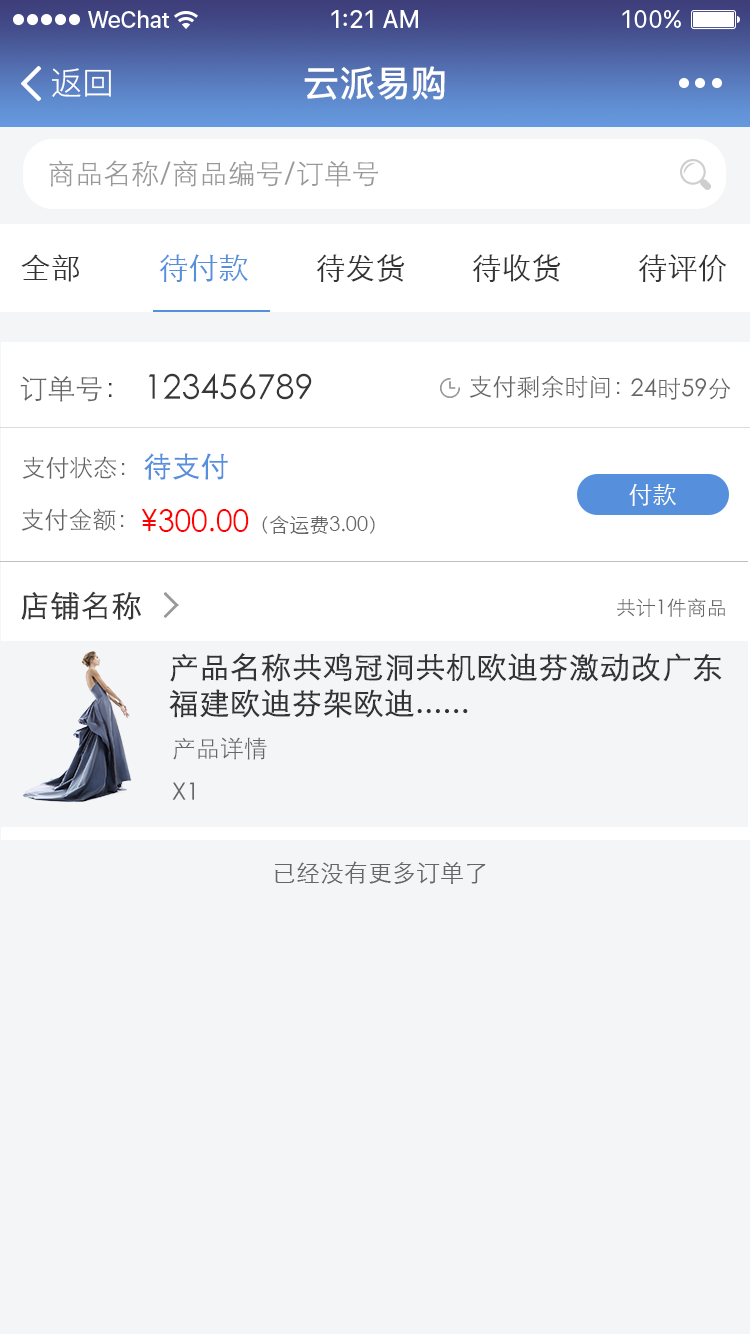
<style>
.page{position:relative;width:750px;height:1334px;background:#f4f5f6}
.page>*{position:absolute;margin:0}
.t1{font:32px "PingFang-SC-Regular";color:#ffffff}
.t2{font:36px "PingFang-SC-Bold";color:#ffffff}
.t3{font:28px "STXihei";color:#999999}
.t4{font:30px "STXihei";color:#333333}
.t5{font:30px "STXihei";color:#568fdc}
.t6{font:28px "STXihei";color:#666666}
.t7{font:28px "STXihei";color:#373737}
.t8{font:34px "STXihei";color:#373737}
.t9{font:24px "STXihei";color:#666666}
.t10{font:28px "STXihei";color:#568fdc;font-weight:bold}
.t11{font:24px "STXihei";color:#ffffff}
.t12{font:20px "STXihei";color:#666666}
.t13{font:30px "STXihei";color:#ff0000}
.t14{font:30px "STXihei";color:#373737;font-weight:bold}
.t15{font:30px "STXihei";color:#333333;font-weight:bold}
</style>
<div class="page">
<p class="t1" style="left:52px;top:68px;width:59px;height:29px">返回</p>
<p class="t2" style="left:304px;top:66px;width:141px;height:34px">云派易购</p>
<p class="t3" style="left:49px;top:160px;width:329px;height:27px">商品名称/商品编号/订单号</p>
<p class="t4" style="left:21px;top:254px;width:58px;height:28px">全部</p>
<p class="t5" style="left:159px;top:254px;width:89px;height:28px">待付款</p>
<p class="t4" style="left:316px;top:254px;width:89px;height:28px">待发货</p>
<p class="t4" style="left:472px;top:254px;width:89px;height:28px">待收货</p>
<p class="t4" style="left:638px;top:254px;width:89px;height:28px">待评价</p>
<p class="t6" style="left:20px;top:376px;width:92px;height:26px">订单号<span class="t7">：</span></p>
<p class="t8" style="left:148px;top:373px;width:164px;height:27px">123456789</p>
<p class="t9" style="left:469px;top:375px;width:151px;height:23px">支付剩余时间：</p>
<p class="t9" style="left:631px;top:377px;width:100px;height:23px">24时59分</p>
<p class="t9" style="left:22px;top:456px;width:103px;height:23px">支付状态：</p>
<p class="t10" style="left:144px;top:453px;width:84px;height:27px">待支付</p>
<p class="t11" style="left:629px;top:484px;width:47px;height:22px">付款</p>
<p class="t9" style="left:21px;top:508px;width:103px;height:23px">支付金额：</p>
<p class="t12" style="left:141px;top:509px;width:234px;height:25px"><span class="t13">¥300.00</span>（含运费3.00）</p>
<p class="t14" style="left:21px;top:591px;width:120px;height:29px">店铺名称</p>
<p class="t12" style="left:617px;top:598px;width:108px;height:19px">共计1件商品</p>
<p class="t15" style="left:169px;top:653px;width:553px;height:65px">产品名称共鸡冠洞共机欧迪芬激动改广东福建欧迪芬架欧迪......</p>
<p class="t9" style="left:173px;top:737px;width:94px;height:23px">产品详情</p>
<p class="t9" style="left:172px;top:782px;width:22px;height:18px">X1</p>
<p class="t9" style="left:275px;top:861px;width:211px;height:23px">已经没有更多订单了</p>
</div>
